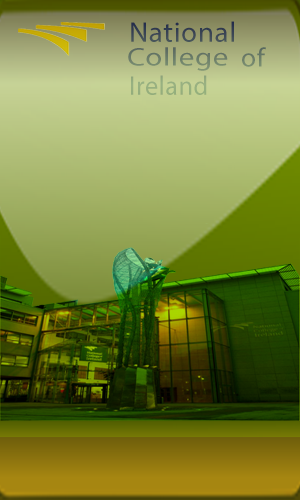
<style>
.page{position:relative;width:300px;height:500px}
.page>*{position:absolute;margin:0}
.t1{font:28.5px "MyriadPro-Regular";letter-spacing:0.02em;color:#3a4454}
.t2{font:25.7px "MyriadPro-Regular";letter-spacing:0.02em;color:#6c7e69;scale:1.21 1}
.t3{font:26.9px "MyriadPro-Regular";letter-spacing:0.02em;color:#6d7e69}
.t4{font:27.1px "MyriadPro-Regular";letter-spacing:0.02em;color:#97b07f;scale:0.97 1}
</style>
<div class="page">
<p class="t1" style="left:131px;top:21px;width:103px;height:21px">National</p>
<p class="t2" style="left:128px;top:47px;width:100px;height:24px">College</p>
<p class="t3" style="left:242px;top:47px;width:24px;height:20px">of</p>
<p class="t4" style="left:131px;top:75px;width:76px;height:20px">Ireland</p>
</div>
